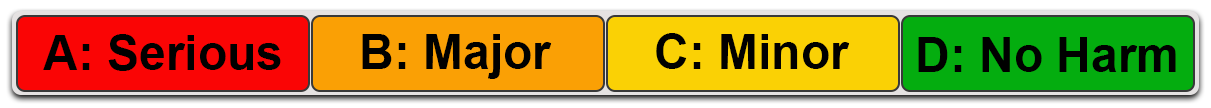
<style>
.page{position:relative;width:1211px;height:108px}
.page>*{position:absolute;margin:0}
.t1{font:48px "Arial-BoldMT";color:#000000}
</style>
<div class="page">
<p class="t1" style="left:43px;top:34px;width:238px;height:37px">A: Serious</p>
<p class="t1" style="left:362px;top:34px;width:190px;height:45px">B: Major</p>
<p class="t1" style="left:656px;top:33px;width:194px;height:36px">C: Minor</p>
<p class="t1" style="left:918px;top:37px;width:258px;height:35px">D: No Harm</p>
</div>
